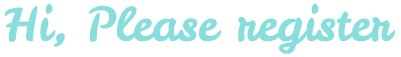
<style>
.page{position:relative;width:401px;height:57px;background:#ffffff}
.page>*{position:absolute;margin:0}
.t1{font:46.7px "LeckerliOne-Regular";color:#88dddd}
</style>
<div class="page">
<p class="t1" style="left:4px;top:3px;width:391px;height:51px">Hi, Please register</p>
</div>
